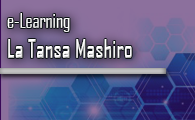
<style>
.page{position:relative;width:195px;height:120px}
.page>*{position:absolute;margin:0}
.t1{font:25.4px "AgencyFB-Reg";color:#ffffff;scale:0.91 1}
.t2{font:20.3px "AgencyFB-Reg";color:#ffffff;scale:0.91 1}
</style>
<div class="page">
<p class="t1" style="left:7px;top:13px;width:125px;height:45px"><span class="t2">e-Learning<br></span>La Tansa Mashiro</p>
</div>
